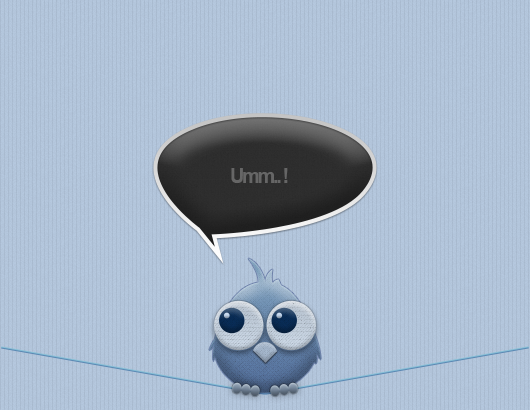
<style>
.page{position:relative;width:530px;height:410px}
.page>*{position:absolute;margin:0}
.t1{font:20.1px "Arial-BoldMT";letter-spacing:-0.12em;color:#666666}
</style>
<div class="page">
<p class="t1" style="left:231px;top:168px;width:57px;height:15px">Umm.. !</p>
</div>
